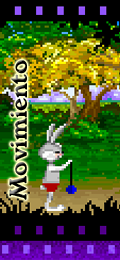
<style>
.page{position:relative;width:120px;height:260px}
.page>*{position:absolute;margin:0}
.t1{font:24px "WindsorBT-Roman";color:#000000}
</style>
<div class="page">
<p class="t1" style="left:9px;top:60px;width:18px;height:140px;rotate:-90deg">Movimiento</p>
</div>
